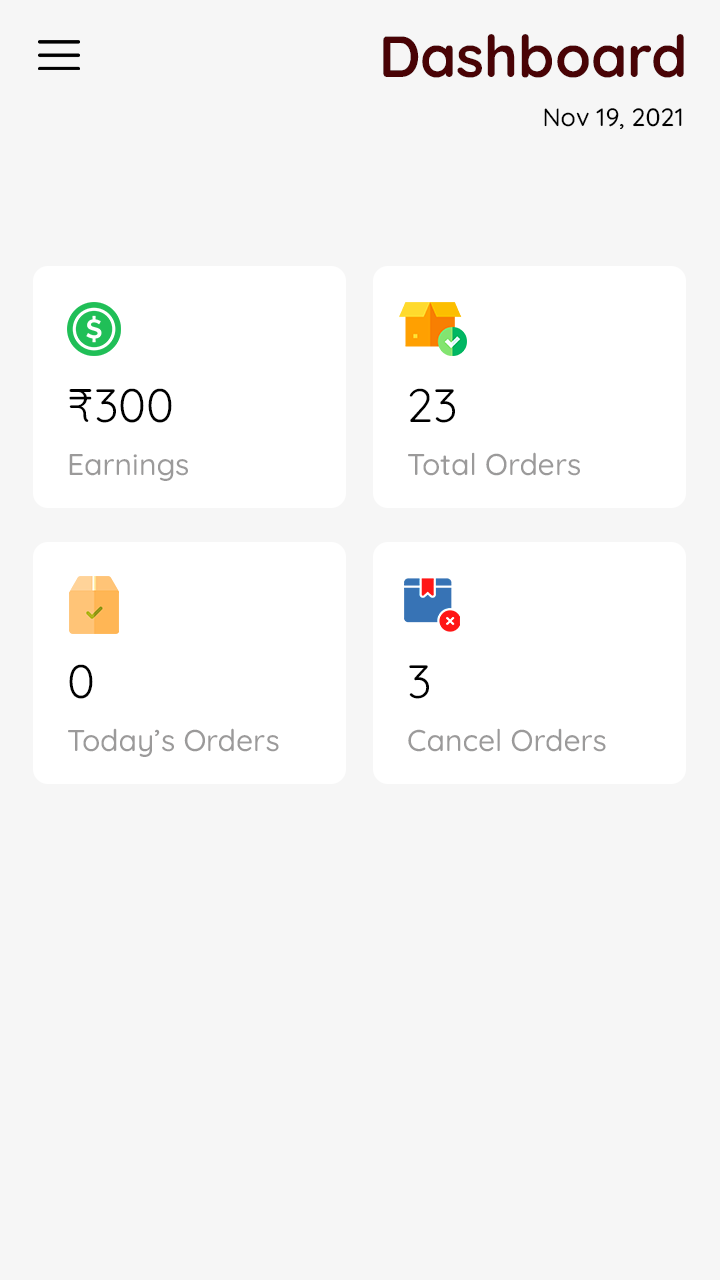
<style>
.page{position:relative;width:720px;height:1280px;background:#f6f6f6}
.page>*{position:absolute;margin:0}
.t1{font:58px "Quicksand-Bold";color:#490305}
.t2{font:25px "Quicksand-Medium";color:#000000}
.t3{font:47px "Quicksand-Regular";color:#000000}
.t4{font:30px "Quicksand-Medium";color:#9b9a9a}
</style>
<div class="page">
<p class="t1" style="left:383px;top:34px;width:301px;height:44px">Dashboard</p>
<p class="t2" style="left:544px;top:108px;width:138px;height:22px">Nov 19, 2021</p>
<p class="t3" style="left:69px;top:388px;width:103px;height:35px">₹300</p>
<p class="t3" style="left:409px;top:388px;width:46px;height:35px">23</p>
<p class="t4" style="left:69px;top:454px;width:119px;height:27px">Earnings</p>
<p class="t4" style="left:408px;top:452px;width:172px;height:24px">Total Orders</p>
<p class="t3" style="left:69px;top:664px;width:24px;height:35px">0</p>
<p class="t3" style="left:409px;top:665px;width:20px;height:34px">3</p>
<p class="t4" style="left:68px;top:728px;width:211px;height:29px">Today’s Orders</p>
<p class="t4" style="left:408px;top:728px;width:198px;height:24px">Cancel Orders</p>
</div>
